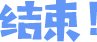
<style>
.page{position:relative;width:97px;height:42px;background:#6297f8}
.page>*{position:absolute;margin:0}
.t1{font:50px "HYZhuZiMuTouRenW";color:#6297f8}
</style>
<div class="page">
<p class="t1" style="left:0px;top:0px;width:98px;height:42px">结束！</p>
</div>
